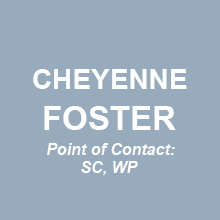
<style>
.page{position:relative;width:220px;height:220px;background:#98abbc}
.page>*{position:absolute;margin:0}
.t1{font:28px "Arial-BoldMT";color:#ffffff}
.t2{font:33px "Arial-BoldMT";color:#ffffff}
.t3{font:16px "Arial-BoldItalicMT";color:#ffffff}
</style>
<div class="page">
<p class="t1" style="left:33px;top:69px;width:154px;height:20px">CHEYENNE</p>
<p class="t2" style="left:44px;top:106px;width:132px;height:24px">FOSTER</p>
<p class="t3" style="left:47px;top:143px;width:128px;height:12px">Point of Contact:</p>
<p class="t3" style="left:81px;top:161px;width:57px;height:14px">SC, WP</p>
</div>
